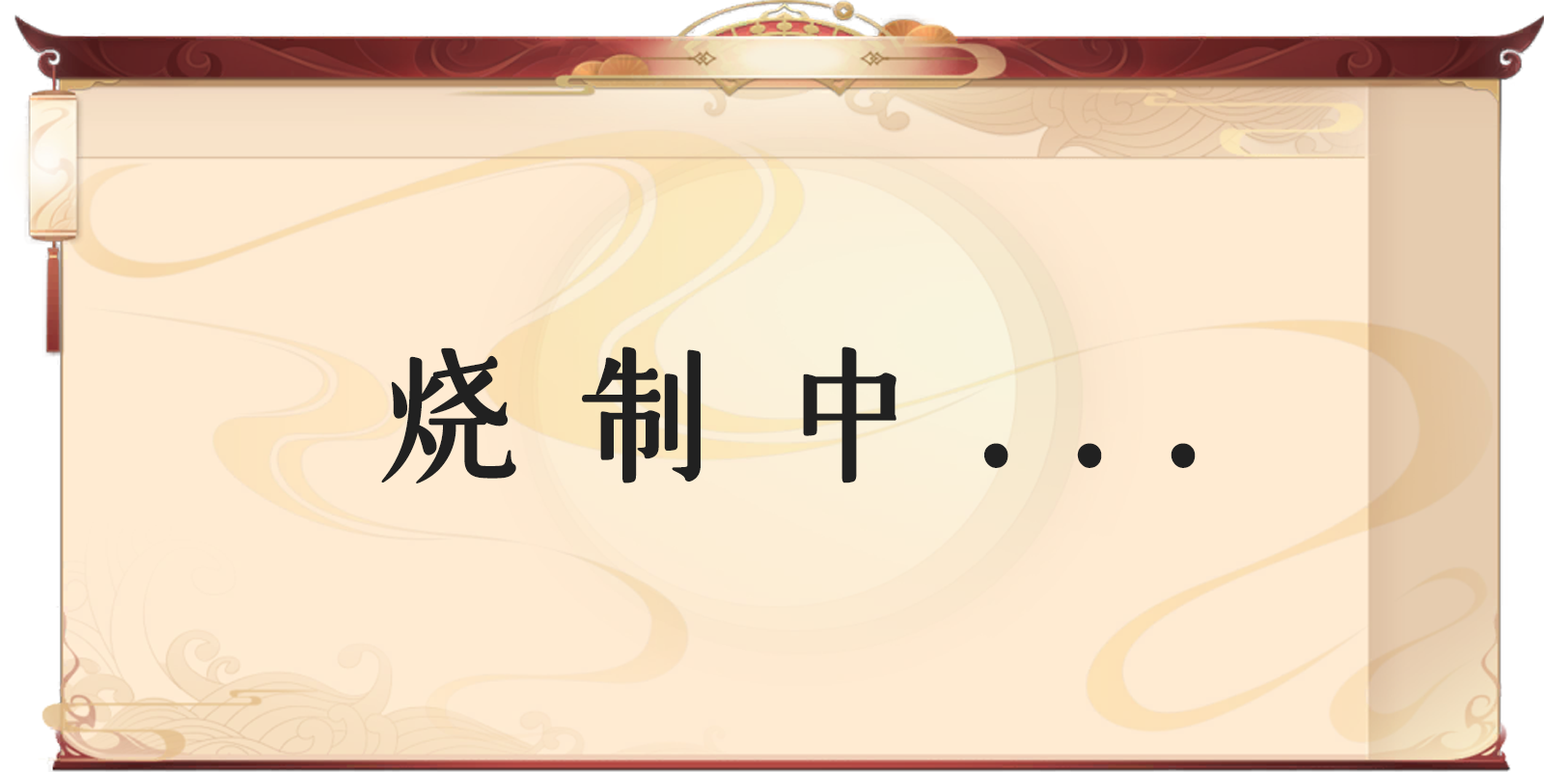
<style>
.page{position:relative;width:1544px;height:772px;background:#ffebd2}
.page>*{position:absolute;margin:0}
.t1{font:144.8px "TsangerXuanSanM-W05";letter-spacing:0.38em;color:#212121}
</style>
<div class="page">
<p class="t1" style="left:381px;top:347px;width:815px;height:137px">烧制中...</p>
</div>
